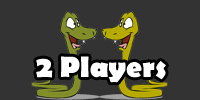
<style>
.page{position:relative;width:200px;height:100px;background:#333333}
.page>*{position:absolute;margin:0}
.t1{font:30px "BerlinSansFB-Bold";color:#ffffff}
</style>
<div class="page">
<p class="t1" style="left:36px;top:56px;width:130px;height:27px">2 Players</p>
</div>
